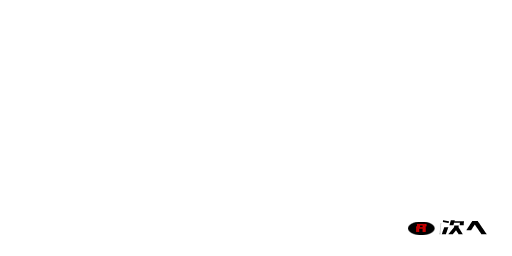
<style>
.page{position:relative;width:512px;height:256px;background:#ffffff}
.page>*{position:absolute;margin:0}
.t1{font:24px "851Gkktt";color:#000000}
</style>
<div class="page">
<p class="t1" style="left:441px;top:220px;width:46px;height:15px">次へ</p>
</div>
